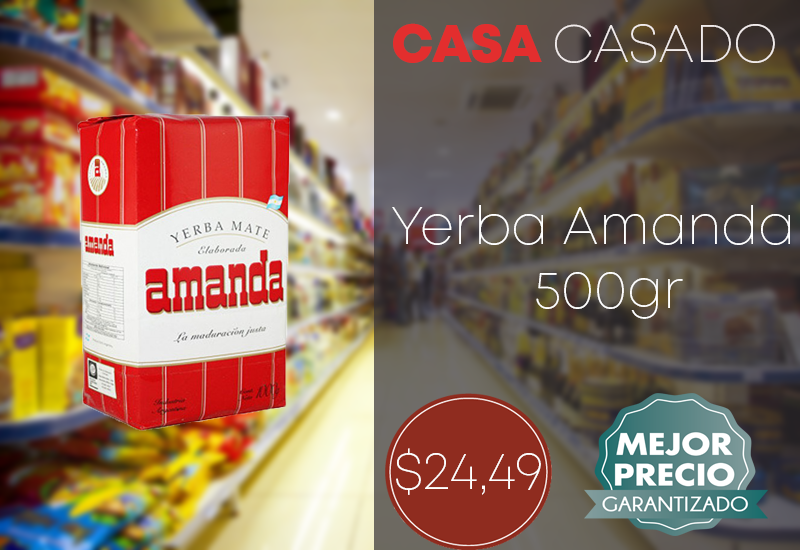
<style>
.page{position:relative;width:800px;height:550px}
.page>*{position:absolute;margin:0}
.t1{font:53.3px "Mont-ExtraLightDEMO";color:#f1ebeb}
.t2{font:53.3px "Mont-HeavyDEMO";color:#e32e2e}
.t3{font:53.3px "Mont-ExtraLightDEMO";color:#ffffff}
</style>
<div class="page">
<p class="t1" style="left:393px;top:23px;width:382px;height:40px"><span class="t2">CASA </span>CASADO</p>
<p class="t3" style="left:392px;top:205px;width:398px;height:114px">Yerba Amanda<br>    500gr</p>
<p class="t3" style="left:396px;top:448px;width:145px;height:47px">$24,49</p>
</div>
